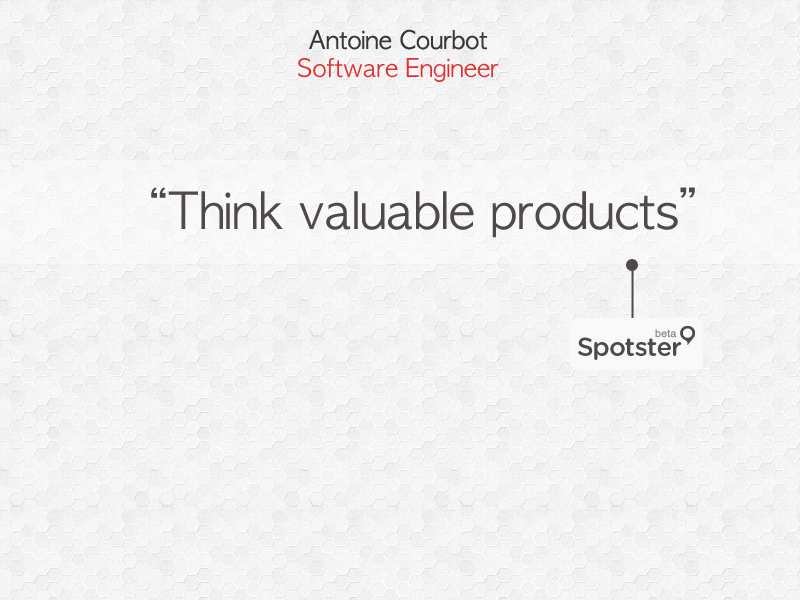
<style>
.page{position:relative;width:800px;height:600px}
.page>*{position:absolute;margin:0}
.t1{font:24px "AppleGothic";color:#3a3636}
.t2{font:24px "AppleGothic";color:#df3333}
.t3{font:48px "AppleGothic";color:#4f4949}
</style>
<div class="page">
<p class="t1" style="left:309px;top:29px;width:178px;height:21px">Antoine Courbot</p>
<p class="t2" style="left:298px;top:58px;width:201px;height:24px">Software Engineer</p>
<p class="t3" style="left:151px;top:187px;width:544px;height:51px">“Think valuable products”</p>
</div>
